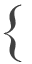
<style>
.page{position:relative;width:32px;height:64px;background:#ffffff}
.page>*{position:absolute;margin:0}
.t1{font:64px "STSong";letter-spacing:-0.26em;color:#404040}
</style>
<div class="page">
<p class="t1" style="left:3px;top:4px;width:19px;height:58px">{</p>
</div>
